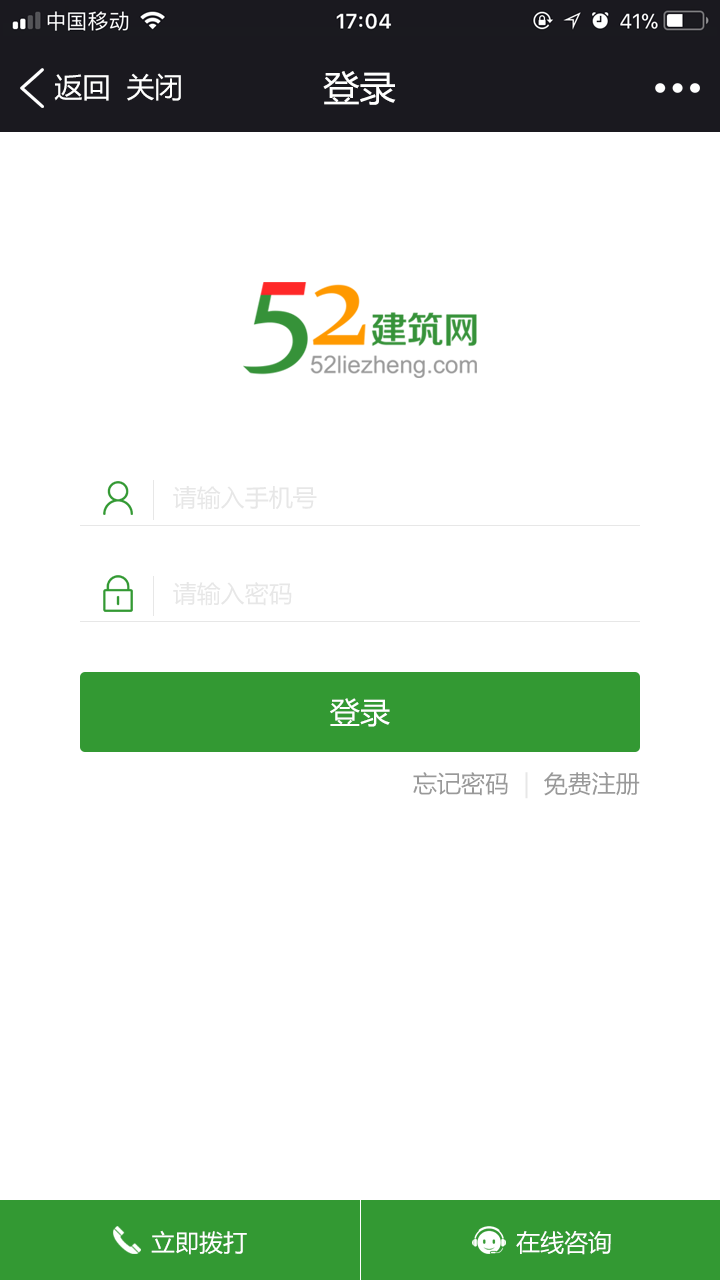
<style>
.page{position:relative;width:720px;height:1280px;background:#ffffff}
.page>*{position:absolute;margin:0}
.t1{font:28px "MicrosoftYaHei";color:#ffffff}
.t2{font:36px "MicrosoftYaHei";color:#ffffff}
.t3{font:24px "MicrosoftYaHei";color:#e7e7e7}
.t4{font:30px "MicrosoftYaHei";color:#ffffff}
.t5{font:24px "MicrosoftYaHei";color:#999999}
.t6{font:24px "MicrosoftYaHei";color:#ffffff}
</style>
<div class="page">
<p class="t1" style="left:54px;top:74px;width:55px;height:27px">返回</p>
<p class="t1" style="left:127px;top:73px;width:54px;height:28px">关闭</p>
<p class="t2" style="left:323px;top:71px;width:73px;height:34px">登录</p>
<p class="t3" style="left:173px;top:486px;width:144px;height:24px">请输入手机号</p>
<p class="t3" style="left:173px;top:582px;width:119px;height:24px">请输入密码</p>
<p class="t4" style="left:330px;top:698px;width:60px;height:29px">登录</p>
<p class="t5" style="left:413px;top:771px;width:227px;height:28px">忘记密码  <span class="t3">|</span>  免费注册</p>
<p class="t6" style="left:151px;top:1230px;width:96px;height:25px">立即拨打</p>
<p class="t6" style="left:516px;top:1231px;width:95px;height:24px">在线咨询</p>
</div>
